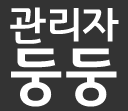
<style>
.page{position:relative;width:128px;height:111px;background:#333333}
.page>*{position:absolute;margin:0}
.t1{font:42px "GyeonggiTitleMOTF";color:#ffffff}
.t2{font:65px "GyeonggiTitleMOTF";color:#ffffff}
</style>
<div class="page">
<p class="t1" style="left:10px;top:7px;width:109px;height:37px">관리자</p>
<p class="t2" style="left:11px;top:48px;width:106px;height:59px">둥둥</p>
</div>
